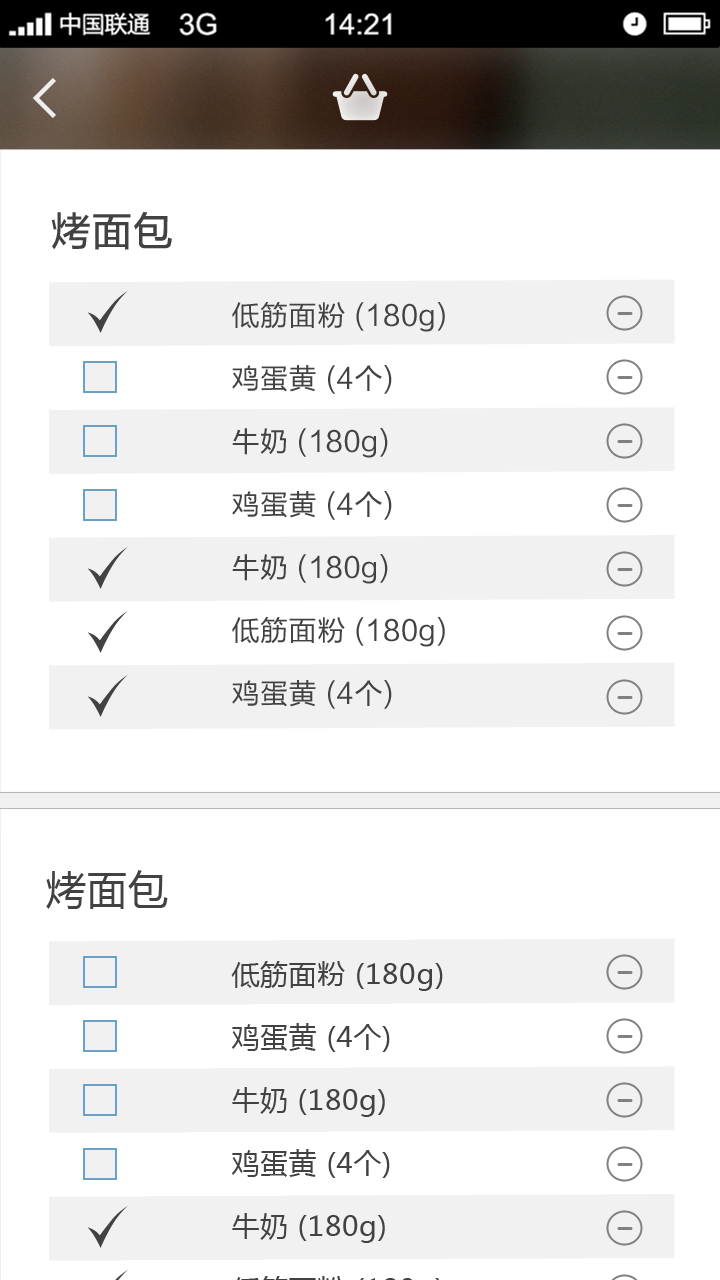
<style>
.page{position:relative;width:720px;height:1280px;background:#ffffff}
.page>*{position:absolute;margin:0}
.t1{font:40px "FZLTZHUNHK--GBK1-0";letter-spacing:0.024em;color:#424242}
.t2{font:28px/63px "FZLTHK--GBK1-0";letter-spacing:0.024em;color:#424242}
.t3{font:40px "MicrosoftYaHei";letter-spacing:0.024em;color:#424242}
</style>
<div class="page">
<p class="t1" style="left:51px;top:212px;width:121px;height:38px">烤面包</p>
<p class="t2" style="left:232px;top:302px;width:213px;height:407px">低筋面粉 (180g)<br>鸡蛋黄 (4个)<br>牛奶 (180g)<br>鸡蛋黄 (4个)<br>牛奶 (180g)<br>低筋面粉 (180g)<br>鸡蛋黄 (4个)</p>
<p class="t3" style="left:46px;top:870px;width:122px;height:39px">烤面包</p>
</div>
